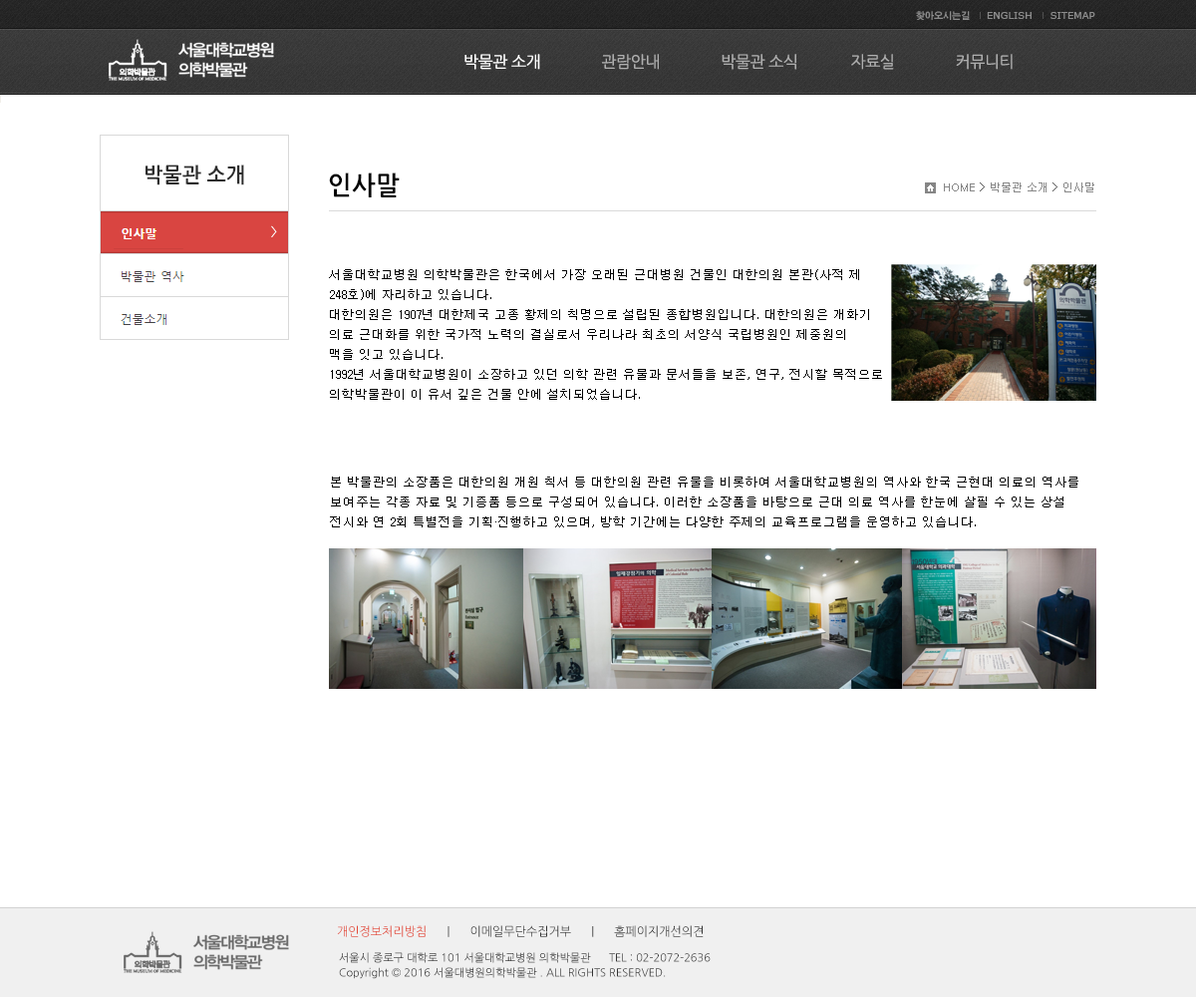
<style>
.page{position:relative;width:1196px;height:997px;background:#ffffff}
.page>*{position:absolute;margin:0}
.t1{font:15.9px "NanumGothic";letter-spacing:-0.025em;color:#aeaeae}
.t2{font:15.9px "NanumGothic";letter-spacing:-0.025em;color:#fefefe}
.t3{font:20.9px "NanumGothicBold";color:#2d2d2d}
.t4{font:25.9px "NanumGothicBold";color:#000000}
.t5{font:12.6px/19.9px "Dotum";color:#000000}
.t6{font:12.6px/13.1px "Dotum";color:#000000}
.t7{font:12px "NanumGothic";color:#333333}
.t8{font:12px "NanumGothic";color:#e34a38}
.t9{font:11px/15px "NanumGothic";color:#333333}
.t10{font:11px/13.1px "NanumGothic";color:#333333}
</style>
<div class="page">
<p class="t1" style="left:465px;top:54px;width:548px;height:16px"><span class="t2">박물관 소개               </span>관람안내               박물관 소식             자료실               커뮤니티</p>
<p class="t3" style="left:146px;top:164px;width:98px;height:21px">박물관 소개</p>
<p class="t4" style="left:329px;top:172px;width:71px;height:25px">인사말</p>
<p class="t5" style="left:329px;top:269px;width:553px;height:131px"><span class="t6">서울대학교병원 의학박물관은 한국에서 가장 오래된 근대병원 건물인 대한의원</span> 본관(사적 제<br>248호)에 자리하고 있습니다. <br>대한의원은 1907년 대한제국 고종 황제의 칙명으로 설립된 종합병원입니다. 대한의원은 개화기 <br>의료 근대화를 위한 국가적 노력의 결실로서 우리나라 최초의 서양식 국립병원인 제중원의 <br>맥을 잇고 있습니다. <br>1992년 서울대학교병원이 소장하고 있던 의학 관련 유물과 문서들을 보존, 연구, 전시할 목적으로<br>의학박물관이 이 유서 깊은 건물 안에 설치되었습니다.</p>
<p class="t5" style="left:330px;top:476px;width:749px;height:51px">본 박물관의 소장품은 대한의원 개원 칙서 등 대한의원 관련 유물을 비롯하여 서울대학교병원의 역사와 한국 근현대 의료의 역사를 <br>보여주는 각종 자료 및 기증품 등으로 구성되어 있습니다. 이러한 소장품을 바탕으로 근대 의료 역사를 한눈에 살필 수 있는 상설 <br>전시와 연 2회 특별전을 기획·진행하고 있으며, 방학 기간에는 다양한 주제의 교육프로그램을 운영하고 있습니다.</p>
<p class="t7" style="left:337px;top:925px;width:367px;height:12px"><span class="t8">개인정보처리방침</span>      |      이메일무단수집거부      |      홈페이지개선의견</p>
<p class="t9" style="left:339px;top:952px;width:372px;height:27px"><span class="t10">서울시 종로구 대학로 101 서울대학교병원 의학박물관      TEL : 02-207</span>2-2636<br>Copyright © 2016 서울대병원의학박물관 . ALL RIGHTS RESERVED.</p>
</div>
